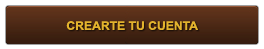
<style>
.page{position:relative;width:264px;height:49px;background:#ffffff}
.page>*{position:absolute;margin:0}
.t1{font:11.8px "Arial-BoldMT";color:#e3b32d}
</style>
<div class="page">
<p class="t1" style="left:66px;top:21px;width:132px;height:9px">CREARTE TU CUENTA</p>
</div>
